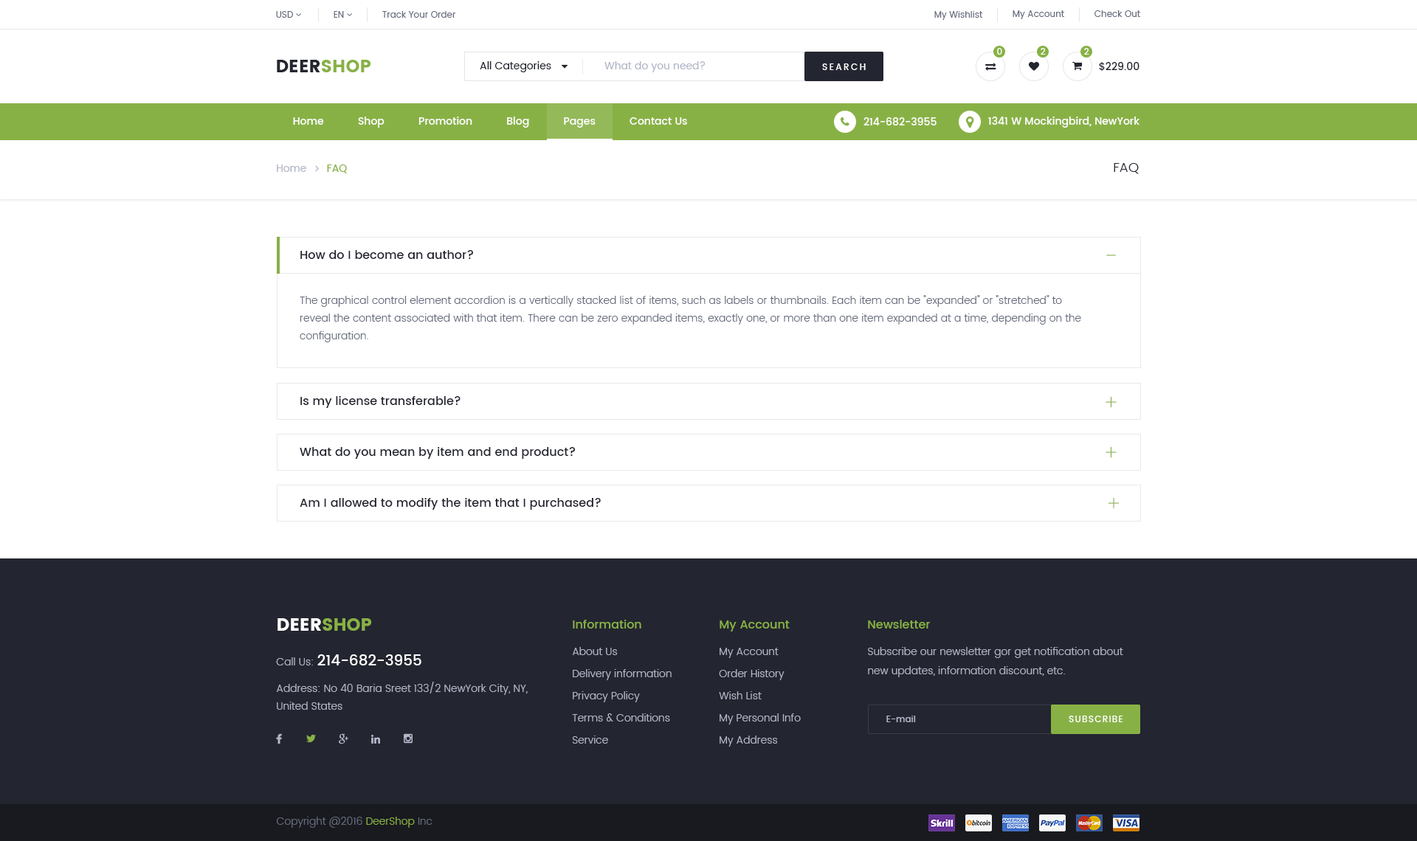
<style>
.page{position:relative;width:1417px;height:841px;background:#ffffff}
.page>*{position:absolute;margin:0}
.t1{font:8.9px "Poppins-Regular";color:#646a7c}
.t2{font:8.9px "Poppins-Medium";color:#ffffff}
.t3{font:17.7px "Poppins";color:#232530;text-transform:uppercase}
.t4{font:17.7px "Poppins";color:#88b145;text-transform:uppercase}
.t5{font:10.3px "Poppins-Regular";color:#232530}
.t6{font:10.3px "Poppins-Regular";color:#b3b7c8}
.t7{font:8.9px "Poppins-Medium";letter-spacing:0.2em;color:#ffffff}
.t8{font:10.3px "Poppins-Medium";color:#232530}
.t9{font:10.3px "Poppins-Medium";color:#ffffff}
.t10{font:13.3px "Poppins-Light";color:#232530}
.t11{font:11.8px "Poppins-Medium";color:#232530}
.t12{font:10.3px/17.7px "Poppins-Light";color:#646a7c}
.t13{font:17.7px "Poppins";color:#ffffff;text-transform:uppercase}
.t14{font:10.3px/22.1px "Poppins-Light";color:#b3b7c8}
.t15{font:11.8px/26.6px "Poppins-Medium";color:#88b145}
.t16{font:10.3px/26.6px "Poppins-Light";color:#b3b7c8}
.t17{font:11.8px "Poppins-Medium";color:#88b145}
.t18{font:10.3px/19.2px "Poppins-Light";color:#b3b7c8}
.t19{font:10.3px/17.7px "Poppins-Light";color:#b3b7c8}
.t20{font:14.8px/22.1px "Poppins-Medium";color:#ffffff}
.t21{font:8.9px "Poppins-Medium";color:#b3b7c8}
.t22{font:8.9px "Poppins-Medium";letter-spacing:0.1em;color:#ffffff;text-transform:uppercase}
.t23{font:10.3px "Poppins-Light";color:#646a7c}
.t24{font:10.3px "Poppins-Light";color:#88b145}
</style>
<div class="page">
<p class="t1" style="left:382px;top:11px;width:74px;height:7px">Track Your Order</p>
<p class="t1" style="left:934px;top:11px;width:49px;height:9px">My Wishlist</p>
<p class="t1" style="left:1013px;top:10px;width:51px;height:9px">My Account</p>
<p class="t1" style="left:1095px;top:10px;width:45px;height:7px">Check Out</p>
<p class="t2" style="left:997px;top:48px;width:5px;height:7px">0</p>
<p class="t2" style="left:1041px;top:48px;width:5px;height:7px">2</p>
<p class="t2" style="left:1084px;top:48px;width:5px;height:7px">2</p>
<p class="t3" style="left:277px;top:60px;width:94px;height:12px">DEER<span class="t4">SHOP</span></p>
<p class="t5" style="left:480px;top:61px;width:71px;height:11px">All Categories</p>
<p class="t6" style="left:605px;top:61px;width:101px;height:11px">What do you need?</p>
<p class="t7" style="left:822px;top:63px;width:44px;height:7px">SEARCH</p>
<p class="t8" style="left:1099px;top:62px;width:41px;height:9px">$229.00</p>
<p class="t9" style="left:293px;top:117px;width:394px;height:11px">Home           Shop           Promotion           Blog           Pages           Contact Us</p>
<p class="t9" style="left:864px;top:117px;width:73px;height:8px">214-682-3955</p>
<p class="t9" style="left:988px;top:117px;width:152px;height:11px">1341 W Mockingbird, NewYork</p>
<p class="t10" style="left:1114px;top:163px;width:25px;height:11px">FAQ</p>
<p class="t11" style="left:300px;top:250px;width:173px;height:9px">How do I become an author?</p>
<p class="t12" style="left:300px;top:295px;width:781px;height:47px">The graphical control element accordion is a vertically stacked list of items, such as labels or thumbnails. Each item can be "expanded" or "stretched" to reveal the content associated with that item. There can be zero expanded items, exactly one, or more than one item expanded at a time, depending on the <br>configuration.</p>
<p class="t11" style="left:300px;top:396px;width:161px;height:12px">Is my license transferable?</p>
<p class="t11" style="left:300px;top:447px;width:275px;height:12px">What do you mean by item and end product?</p>
<p class="t11" style="left:300px;top:498px;width:301px;height:12px">Am I allowed to modify the item that I purchased?</p>
<p class="t13" style="left:278px;top:619px;width:94px;height:12px">DEER<span class="t4">SHOP</span></p>
<p class="t14" style="left:572px;top:620px;width:100px;height:124px"><span class="t15">Information<br></span><span class="t16">About Us<br></span>Delivery information<br>Privacy Policy<br>Terms &amp; Conditions<br>Service</p>
<p class="t14" style="left:719px;top:621px;width:82px;height:126px"><span class="t15">My Account<br></span><span class="t16">My Account<br></span>Order History<br>Wish List<br>My Personal Info<br>My Address</p>
<p class="t17" style="left:868px;top:620px;width:62px;height:9px">Newsletter</p>
<p class="t18" style="left:868px;top:647px;width:255px;height:31px">Subscribe our newsletter gor get notification about new updates, information discount, etc.</p>
<p class="t19" style="left:276px;top:655px;width:252px;height:55px"><span class="t14">Call Us: </span><span class="t20">214-682-3955<br></span><span class="t16">Address: No 40 Baria Sr</span>eet 133/2 NewYork City, NY,  <br>United States</p>
<p class="t21" style="left:886px;top:716px;width:30px;height:7px">E-mail</p>
<p class="t22" style="left:1069px;top:716px;width:54px;height:7px">Subscribe</p>
<p class="t23" style="left:276px;top:817px;width:157px;height:11px">Copyright @2016 <span class="t24">DeerShop</span> Inc</p>
</div>
